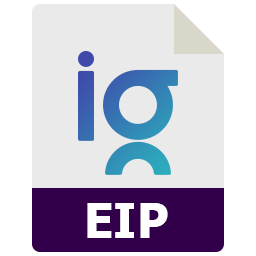
<style>
.page{position:relative;width:256px;height:256px;background:#eaeaea}
.page>*{position:absolute;margin:0}
.t1{font:48px "Tahoma-Bold";color:#ffffff}
</style>
<div class="page">
<p class="t1" style="left:87px;top:203px;width:81px;height:35px">EIP</p>
</div>
